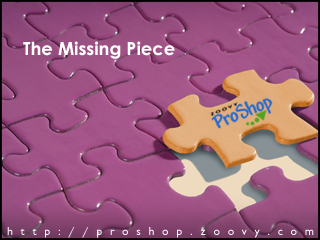
<style>
.page{position:relative;width:320px;height:240px}
.page>*{position:absolute;margin:0}
.t1{font:18px "CenturyGothic-Bold";color:#ffffff}
.t2{font:12px "Chantilly";letter-spacing:0.65em;color:#ffffff}
</style>
<div class="page">
<p class="t1" style="left:23px;top:41px;width:152px;height:18px">The Missing Piece</p>
<p class="t2" style="left:7px;top:227px;width:307px;height:11px">http://proshop.zoovy.com</p>
</div>
